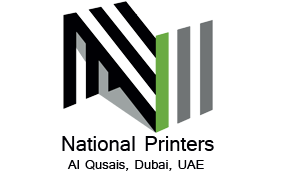
<style>
.page{position:relative;width:285px;height:180px;background:#ffffff}
.page>*{position:absolute;margin:0}
.t1{font:22px "Shruti";color:#000004}
.t2{font:14px "Shruti";color:#000004}
</style>
<div class="page">
<p class="t1" style="left:62px;top:136px;width:152px;height:15px">National Printers</p>
<p class="t2" style="left:67px;top:160px;width:137px;height:11px">Al Qusais, Dubai, UAE</p>
</div>
